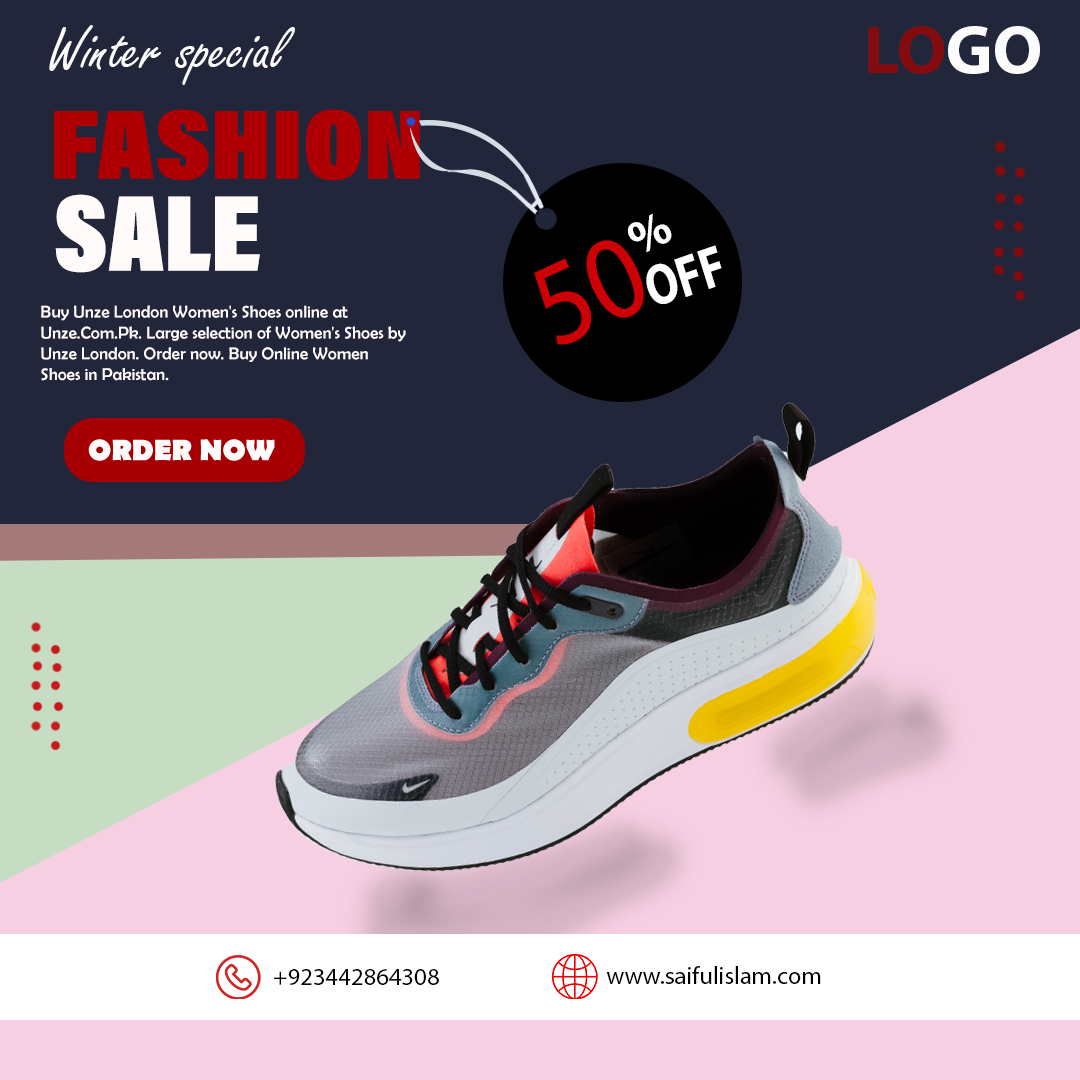
<style>
.page{position:relative;width:1080px;height:1080px;background:#21263a}
.page>*{position:absolute;margin:0}
.t1{font:64.3px "FreestyleScript-Regular";color:#fcfcfc}
.t2{font:68.7px "MyriadPro-Bold";color:#840b0e}
.t3{font:68.7px "MyriadPro-Bold";color:#fcfcfc}
.t4{font:109.9px "AcuminConcept-CondensedUltraBlack";color:#fffbfb}
.t5{font:48px "MyriadPro-Bold";color:#fefefe}
.t6{font:119.4px "MyriadPro-Regular";color:#cd0005;scale:0.91 1}
.t7{font:58.1px "MyriadPro-Bold";color:#fefefe;scale:0.79 1}
.t8{font:17.3px "BerlinSansFB-Reg";color:#fffbfb}
.t9{font:24.5px "MyriadPro-Regular";color:#000000}
.t10{font:24.7px "MyriadPro-Regular";color:#000000}
</style>
<div class="page">
<p class="t1" style="left:49px;top:25px;width:246px;height:60px">Winter special</p>
<p class="t2" style="left:868px;top:26px;width:172px;height:48px">LO<span class="t3">GO</span></p>
<p class="t4" style="left:55px;top:194px;width:205px;height:79px">SALE</p>
<p class="t5" style="left:627px;top:213px;width:45px;height:40px;rotate:-25deg">%</p>
<p class="t6" style="left:534px;top:240px;width:110px;height:105px;rotate:-25deg">50</p>
<p class="t7" style="left:646px;top:245px;width:76px;height:59px;rotate:-19deg">OFF</p>
<p class="t8" style="left:41px;top:305px;width:365px;height:76px">Buy Unze London Women's Shoes online at Unze.Com.Pk. Large selection of Women's Shoes by Unze London. Order now. Buy Online Women Shoes in Pakistan.</p>
<p class="t9" style="left:606px;top:966px;width:215px;height:18px">www.saifulislam.com</p>
<p class="t10" style="left:274px;top:969px;width:165px;height:16px">+923442864308</p>
</div>
